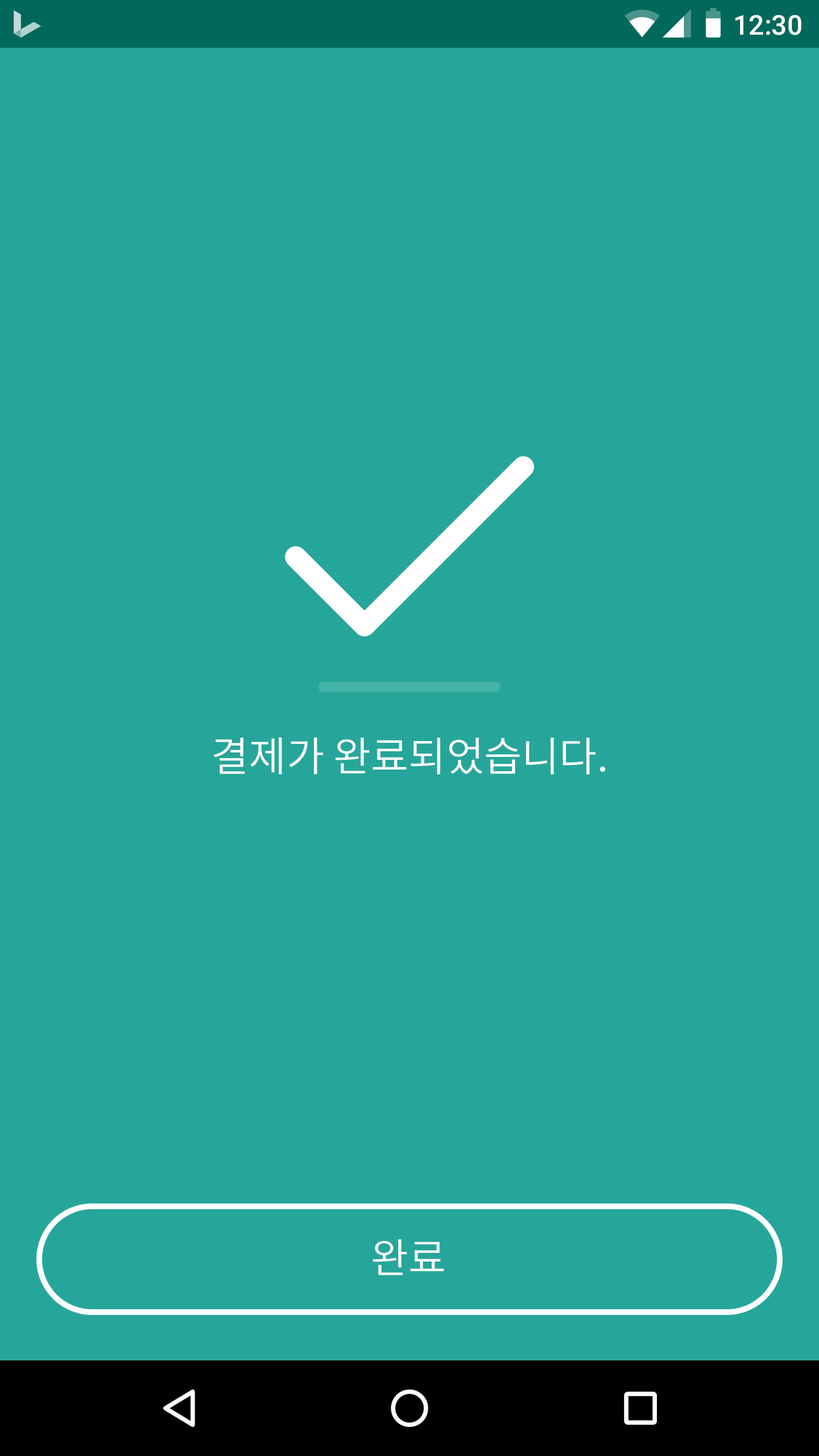
<style>
.page{position:relative;width:819px;height:1456px;background:#26a69a}
.page>*{position:absolute;margin:0}
.t1{font:27.3px "Roboto-Medium";color:#ffffff}
.t2{font:40.9px "NotoSansCJKkr-DemiLight";color:#ffffff}
</style>
<div class="page">
<p class="t1" style="left:735px;top:15px;width:66px;height:20px">12:30</p>
<p class="t2" style="left:213px;top:737px;width:392px;height:38px">결제가 완료되었습니다.</p>
<p class="t2" style="left:373px;top:1239px;width:71px;height:36px">완료</p>
</div>
